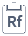
<style>
.page{position:relative;width:28px;height:36px;background:#ffffff}
.page>*{position:absolute;margin:0}
.t1{font:16.7px "SourceSansPro-SemiBold";color:#515d72}
</style>
<div class="page">
<p class="t1" style="left:8px;top:15px;width:15px;height:12px">Rf</p>
</div>
